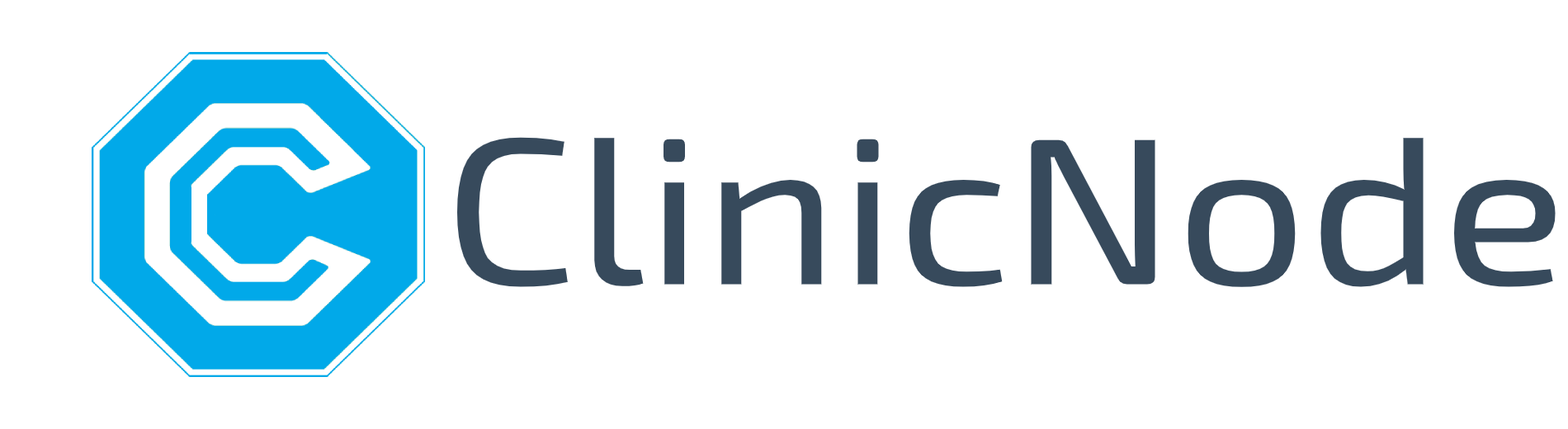
<style>
.page{position:relative;width:1568px;height:429px;background:#ffffff}
.page>*{position:absolute;margin:0}
.t1{font:209.2px "Exo2-Regular";color:#374a5c;scale:1.12 1}
</style>
<div class="page">
<p class="t1" style="left:457px;top:137px;width:1099px;height:150px">ClinicNode</p>
</div>
